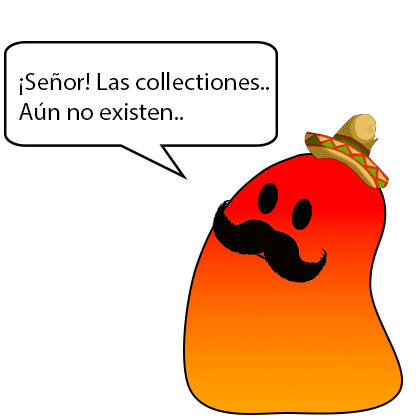
<style>
.page{position:relative;width:420px;height:420px;background:#ffffff}
.page>*{position:absolute;margin:0}
.t1{font:25px "MyriadPro-Regular";color:#000000}
</style>
<div class="page">
<p class="t1" style="left:19px;top:72px;width:250px;height:48px">¡Señor! Las collectiones..<br>Aún no existen..</p>
</div>
